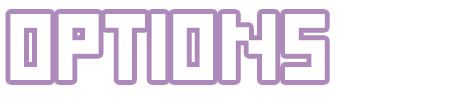
<style>
.page{position:relative;width:464px;height:98px;background:#ffffff}
.page>*{position:absolute;margin:0}
.t1{font:91.4px "DSPixelCyr";letter-spacing:0.025em;color:#ffffff}
</style>
<div class="page">
<p class="t1" style="left:10px;top:14px;width:315px;height:66px">options</p>
</div>
